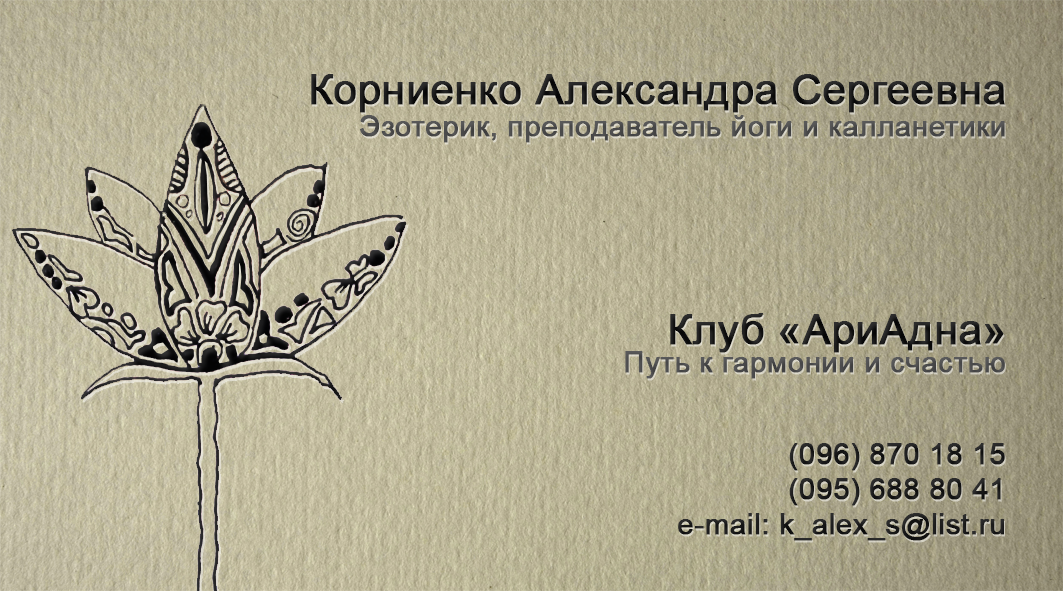
<style>
.page{position:relative;width:1063px;height:591px}
.page>*{position:absolute;margin:0}
.t1{font:41.7px "ArialMT";color:#1d1d1d;font-weight:bold}
.t2{font:29.2px "ArialMT";color:#4e4e4e;font-weight:bold}
.t3{font:41.7px "ArialMT";color:#1c1c1c;font-weight:bold}
.t4{font:29.2px "ArialMT";color:#4e4e4f;font-weight:bold}
.t5{font:29.2px "ArialMT";color:#1e1e1e;font-weight:bold}
</style>
<div class="page">
<p class="t1" style="left:311px;top:74px;width:694px;height:39px">Корниенко Александра Сергеевна</p>
<p class="t2" style="left:360px;top:115px;width:645px;height:28px">Эзотерик, преподаватель йоги и калланетики</p>
<p class="t3" style="left:670px;top:313px;width:334px;height:40px">Клуб «АриАдна»</p>
<p class="t4" style="left:625px;top:351px;width:380px;height:28px">Путь к гармонии и счастью</p>
<p class="t5" style="left:678px;top:443px;width:327px;height:98px;text-align:right">(096) 870 18 15<br>(095) 688 80 41<br>e-mail: k_alex_s@list.ru</p>
</div>
